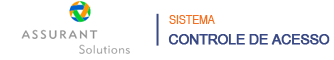
<style>
.page{position:relative;width:334px;height:60px;background:#ffffff}
.page>*{position:absolute;margin:0}
.t1{font:12.7px "ArialNarrow";color:#f57021}
.t2{font:13.7px "ArialNarrow";letter-spacing:-0.025em;color:#384884;font-weight:bold;scale:1.22 1}
</style>
<div class="page">
<p class="t1" style="left:169px;top:15px;width:46px;height:9px">SISTEMA</p>
<p class="t2" style="left:168px;top:34px;width:162px;height:11px">CONTROLE DE ACESSO</p>
</div>
